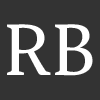
<style>
.page{position:relative;width:100px;height:100px;background:#333333}
.page>*{position:absolute;margin:0}
.t1{font:72px "BespokeSerif-Regular";color:#ffffff}
</style>
<div class="page">
<p class="t1" style="left:7px;top:24px;width:86px;height:52px">RB</p>
</div>
